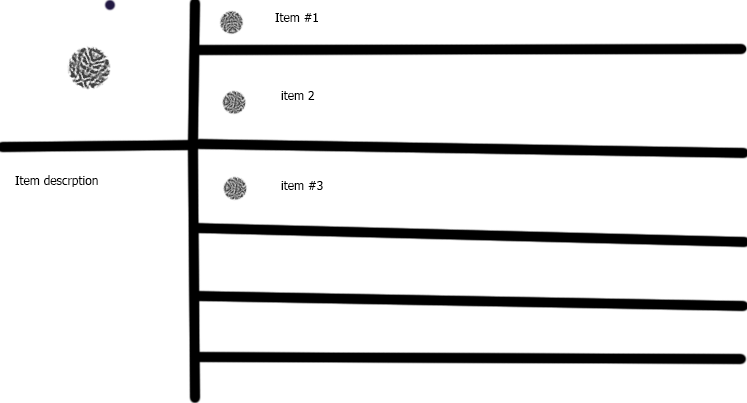
<style>
.page{position:relative;width:747px;height:403px;background:#ffffff}
.page>*{position:absolute;margin:0}
.t1{font:12px "Tahoma";color:#000000}
</style>
<div class="page">
<p class="t1" style="left:275px;top:13px;width:43px;height:9px">Item #1</p>
<p class="t1" style="left:281px;top:91px;width:34px;height:9px">item 2</p>
<p class="t1" style="left:15px;top:175px;width:83px;height:12px">Item descrption</p>
<p class="t1" style="left:281px;top:181px;width:42px;height:9px">item #3</p>
</div>
